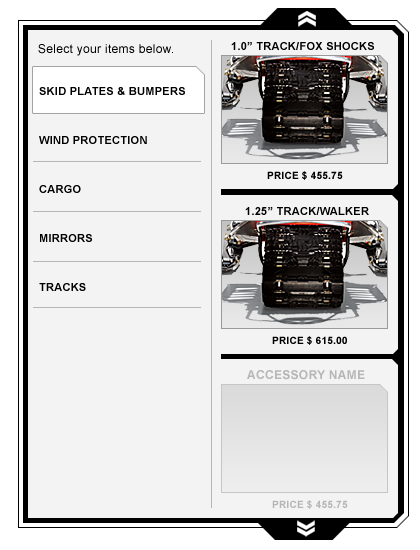
<style>
.page{position:relative;width:420px;height:550px;background:#f3f3f3}
.page>*{position:absolute;margin:0}
.t1{font:12px "ArialMT";letter-spacing:0.025em;color:#000000}
.t2{font:11px "Arial-BoldMT";letter-spacing:0.025em;color:#000000;text-transform:uppercase}
.t3{font:11px/49px "Arial-BoldMT";letter-spacing:0.025em;color:#000000;text-transform:uppercase}
.t4{font:10px "Arial-BoldMT";letter-spacing:0.025em;color:#000000;text-transform:uppercase}
.t5{font:12px "Arial-BoldMT";letter-spacing:0.025em;color:#b6b6b6;text-transform:uppercase}
.t6{font:10px "Arial-BoldMT";letter-spacing:0.025em;color:#b6b6b6;text-transform:uppercase}
</style>
<div class="page">
<p class="t1" style="left:38px;top:44px;width:135px;height:12px">Select your items below.</p>
<p class="t2" style="left:231px;top:42px;width:143px;height:8px">1.0” Track/Fox Shocks</p>
<p class="t3" style="left:39px;top:87px;width:146px;height:204px">skid plates &amp; bumpers<br>wind protection<br>cargo<br>mirrors<br>tracks</p>
<p class="t4" style="left:267px;top:171px;width:76px;height:9px">price $ 455.75</p>
<p class="t2" style="left:245px;top:207px;width:124px;height:8px">1.25” track/walker</p>
<p class="t4" style="left:272px;top:336px;width:75px;height:9px">price $ 615.00</p>
<p class="t5" style="left:247px;top:370px;width:118px;height:10px">Accessory name</p>
<p class="t6" style="left:272px;top:500px;width:76px;height:9px">price $ 455.75</p>
</div>
